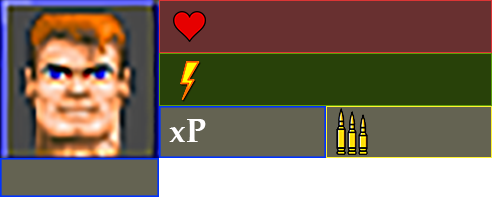
<style>
.page{position:relative;width:492px;height:197px;background:#646352}
.page>*{position:absolute;margin:0}
.t1{font:33.3px "PalatinoLinotype-Bold";color:#fffefe}
</style>
<div class="page">
<p class="t1" style="left:169px;top:119px;width:37px;height:23px">xP</p>
</div>
